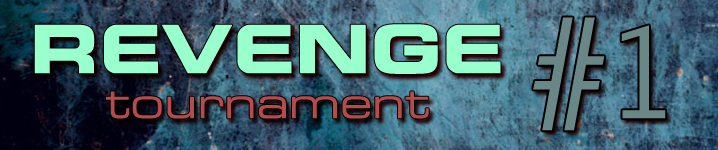
<style>
.page{position:relative;width:718px;height:150px}
.page>*{position:absolute;margin:0}
.t1{font:125px "LetterGothicStd-Bold";color:#698787}
.t2{font:66.7px "ESLstile-Bold";color:#99ffcc}
.t3{font:41.7px "ESL-eSport-Ext-Light";color:#b74a4a}
</style>
<div class="page">
<p class="t1" style="left:533px;top:17px;width:133px;height:114px">#1</p>
<p class="t2" style="left:34px;top:24px;width:467px;height:50px">REVENGE</p>
<p class="t3" style="left:106px;top:91px;width:323px;height:28px">tournament</p>
</div>
